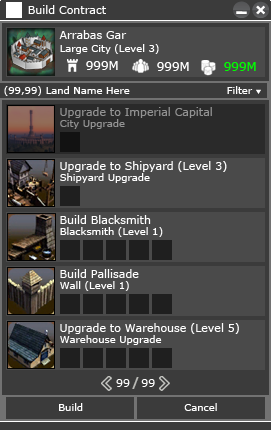
<style>
.page{position:relative;width:271px;height:430px;background:#4a4a4a}
.page>*{position:absolute;margin:0}
.t1{font:11px "Verdana";color:#ffffff}
.t2{font:10px "Verdana";color:#ffffff}
.t3{font:12px "Verdana";color:#ffffff}
.t4{font:12px "Verdana";color:#00ff00}
.t5{font:11px "Verdana";color:#929292}
.t6{font:10px "Verdana";color:#929292}
.t7{font:12px "Verdana-Bold";color:#b9bab6}
</style>
<div class="page">
<p class="t1" style="left:28px;top:5px;width:78px;height:9px">Build Contract</p>
<p class="t1" style="left:59px;top:30px;width:68px;height:9px">Arrabas Gar</p>
<p class="t2" style="left:60px;top:44px;width:99px;height:10px">Large City (Level 3)</p>
<p class="t3" style="left:86px;top:61px;width:32px;height:9px">999M</p>
<p class="t3" style="left:157px;top:62px;width:32px;height:9px">999M</p>
<p class="t4" style="left:224px;top:62px;width:32px;height:9px">999M</p>
<p class="t2" style="left:4px;top:86px;width:37px;height:10px">(99,99)</p>
<p class="t2" style="left:46px;top:86px;width:84px;height:8px">Land Name Here</p>
<p class="t2" style="left:227px;top:86px;width:26px;height:8px">Filter</p>
<p class="t5" style="left:60px;top:107px;width:152px;height:11px">Upgrade to Imperial Capital</p>
<p class="t6" style="left:60px;top:119px;width:65px;height:10px">City Upgrade</p>
<p class="t1" style="left:60px;top:161px;width:167px;height:11px">Upgrade to Shipyard (Level 3)</p>
<p class="t2" style="left:60px;top:173px;width:90px;height:10px">Shipyard Upgrade</p>
<p class="t1" style="left:60px;top:215px;width:91px;height:9px">Build Blacksmith</p>
<p class="t2" style="left:60px;top:227px;width:103px;height:10px">Blacksmith (Level 1)</p>
<p class="t1" style="left:60px;top:269px;width:79px;height:9px">Build Pallisade</p>
<p class="t2" style="left:60px;top:281px;width:69px;height:10px">Wall (Level 1)</p>
<p class="t1" style="left:60px;top:323px;width:179px;height:11px">Upgrade to Warehouse (Level 5)</p>
<p class="t2" style="left:60px;top:335px;width:102px;height:10px">Warehouse Upgrade</p>
<p class="t7" style="left:132px;top:377px;width:7px;height:12px">/</p>
<p class="t1" style="left:116px;top:379px;width:14px;height:8px">99</p>
<p class="t1" style="left:141px;top:379px;width:14px;height:8px">99</p>
<p class="t2" style="left:59px;top:403px;width:24px;height:8px">Build</p>
<p class="t2" style="left:184px;top:403px;width:33px;height:8px">Cancel</p>
</div>
